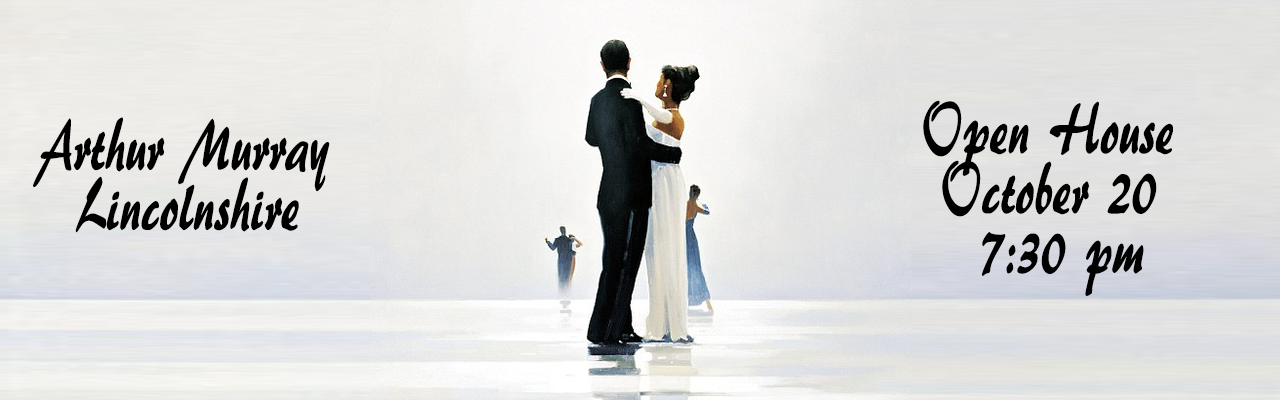
<style>
.page{position:relative;width:1280px;height:400px}
.page>*{position:absolute;margin:0}
.t1{font:18px "ARBERKLEY";color:#000000;scale:0.67 1}
.t2{font:75px "ARBERKLEY";color:#000000;scale:0.67 1}
</style>
<div class="page">
<p class="t1" style="left:923px;top:100px;width:250px;height:196px">Open House<br> October 20<br>   7:30 pm</p>
<p class="t2" style="left:33px;top:117px;width:297px;height:116px">Arthur Murray<br>  Lincolnshire</p>
</div>
